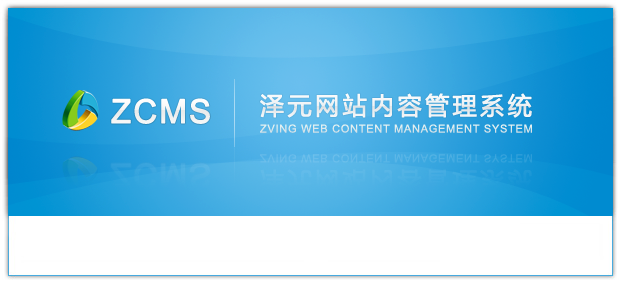
<style>
.page{position:relative;width:620px;height:283px;background:#ffffff}
.page>*{position:absolute;margin:0}
.t1{font:33px "ArialMT";letter-spacing:0.04em;color:#f4f6f6;font-weight:bold}
.t2{font:24px "-";letter-spacing:0.12em;color:#ffffff;font-weight:bold}
.t3{font:11px "ArialMT";letter-spacing:0.04em;color:#dce9ed;font-weight:bold}
</style>
<div class="page">
<p class="t1" style="left:111px;top:98px;width:99px;height:26px">ZCMS</p>
<p class="t2" style="left:260px;top:93px;width:272px;height:25px">泽元网站内容管理系统</p>
<p class="t3" style="left:260px;top:124px;width:272px;height:9px">ZVING WEB CONTENT MANAGEMENT SYSTEM</p>
</div>
